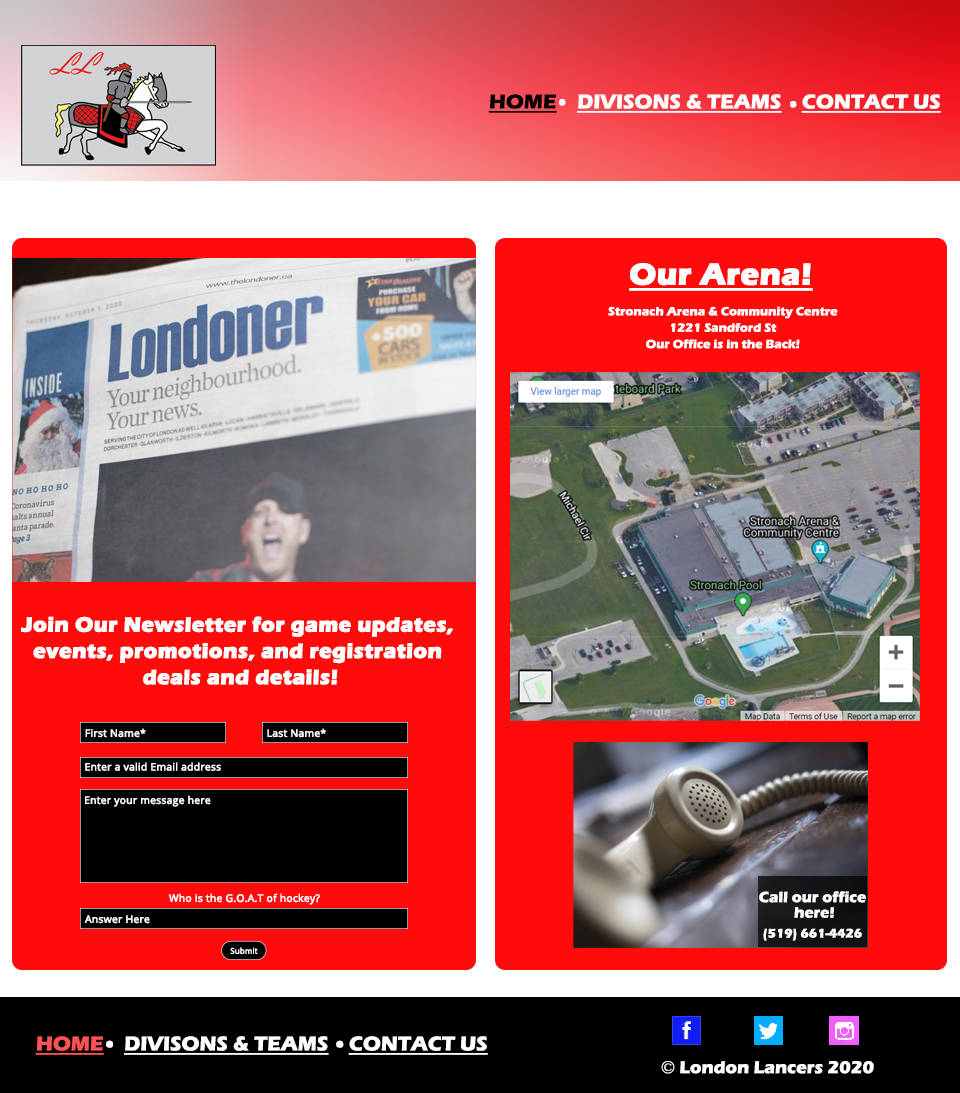
<style>
.page{position:relative;width:960px;height:1093px;background:#ff0b0b}
.page>*{position:absolute;margin:0}
.t1{font:20.7px "ErasITC-Bold";color:#ffffff;text-decoration:underline}
.t2{font:20.7px "ErasITC-Bold";color:#000000;text-decoration:underline}
.t3{font:51.3px "OpenSans";color:#ffffff}
.t4{font:30.8px "ErasITC-Bold";color:#ffffff;font-weight:bold;text-decoration:underline}
.t5{font:12.3px/16.4px "ErasITC-Bold";color:#ffffff}
.t6{font:12.3px/12.3px "ErasITC-Bold";color:#ffffff}
.t7{font:21px/26.3px "ErasITC-Bold";color:#ffffff;font-weight:bold}
.t8{font:21px/15.8px "ErasITC-Bold";color:#ffffff;font-weight:bold}
.t9{font:10.3px "OpenSans";color:#ffffff;font-weight:bold}
.t10{font:15.4px/15.4px "ErasITC-Bold";color:#ffffff}
.t11{font:12.8px "ErasITC-Bold";color:#ffffff}
.t12{font:7.9px "OpenSans";color:#ffffff;font-weight:bold}
.t13{font:20.7px "ErasITC-Bold";color:#ff5252;text-decoration:underline}
.t14{font:51.3px "OpenSans";color:#ffffff;scale:1.12 1}
.t15{font:17.9px "ErasITC-Bold";color:#ffffff}
.t16{font:17.9px "GoudyOldStyleT-Regular";color:#ffffff}
</style>
<div class="page">
<p class="t1" style="left:488px;top:94px;width:453px;height:19px"><span class="t2">HOME    </span>DIVISONS &amp; TEAMS    CONTACT US</p>
<p class="t3" style="left:559px;top:98px;width:7px;height:8px">.</p>
<p class="t3" style="left:790px;top:100px;width:7px;height:8px">.</p>
<p class="t4" style="left:629px;top:263px;width:184px;height:28px">Our Arena!</p>
<p class="t5" style="left:608px;top:306px;width:230px;height:43px;text-align:center">Stronach Arena &amp; Community Centre<br>1221 Sandford St<br>Our Office is in the Back<span class="t6">!</span></p>
<p class="t7" style="left:21px;top:616px;width:432px;height:69px;text-align:center"><span class="t8">Join Our Newsletter for game updates, <br>events, </span>promotions, and registration <br>deals and details!</p>
<p class="t9" style="left:85px;top:728px;width:61px;height:10px">First Name*</p>
<p class="t9" style="left:267px;top:728px;width:59px;height:10px">Last Name*</p>
<p class="t9" style="left:85px;top:762px;width:136px;height:9px">Enter a valid Email address</p>
<p class="t9" style="left:85px;top:795px;width:126px;height:12px">Enter your message here</p>
<p class="t9" style="left:168px;top:893px;width:152px;height:12px">Who is the G.O.A.T of hockey?</p>
<p class="t10" style="left:759px;top:891px;width:107px;height:27px;text-align:center">Call our office <br>here!</p>
<p class="t9" style="left:84px;top:915px;width:66px;height:9px">Answer Here</p>
<p class="t11" style="left:763px;top:928px;width:99px;height:13px">(519) 661-4426</p>
<p class="t12" style="left:230px;top:947px;width:28px;height:7px">Submit</p>
<p class="t1" style="left:35px;top:1036px;width:453px;height:19px"><span class="t13">HOME    </span>DIVISONS &amp; TEAMS    CONTACT US</p>
<p class="t14" style="left:106px;top:1040px;width:7px;height:8px">.</p>
<p class="t14" style="left:336px;top:1040px;width:8px;height:8px">.</p>
<p class="t15" style="left:661px;top:1061px;width:213px;height:13px"><span class="t16">© </span>London Lancers 2020</p>
</div>
